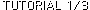
<style>
.page{position:relative;width:90px;height:10px;background:#ffffff}
.page>*{position:absolute;margin:0}
.t1{font:12px "Geneva";color:#000000}
</style>
<div class="page">
<p class="t1" style="left:3px;top:1px;width:85px;height:9px">TUTORIAL 1/3</p>
</div>
